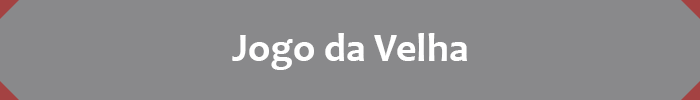
<style>
.page{position:relative;width:700px;height:100px;background:#89898b}
.page>*{position:absolute;margin:0}
.t1{font:40px "Candara-Bold";color:#ffffff}
</style>
<div class="page">
<p class="t1" style="left:232px;top:33px;width:235px;height:37px">Jogo da Velha</p>
</div>
